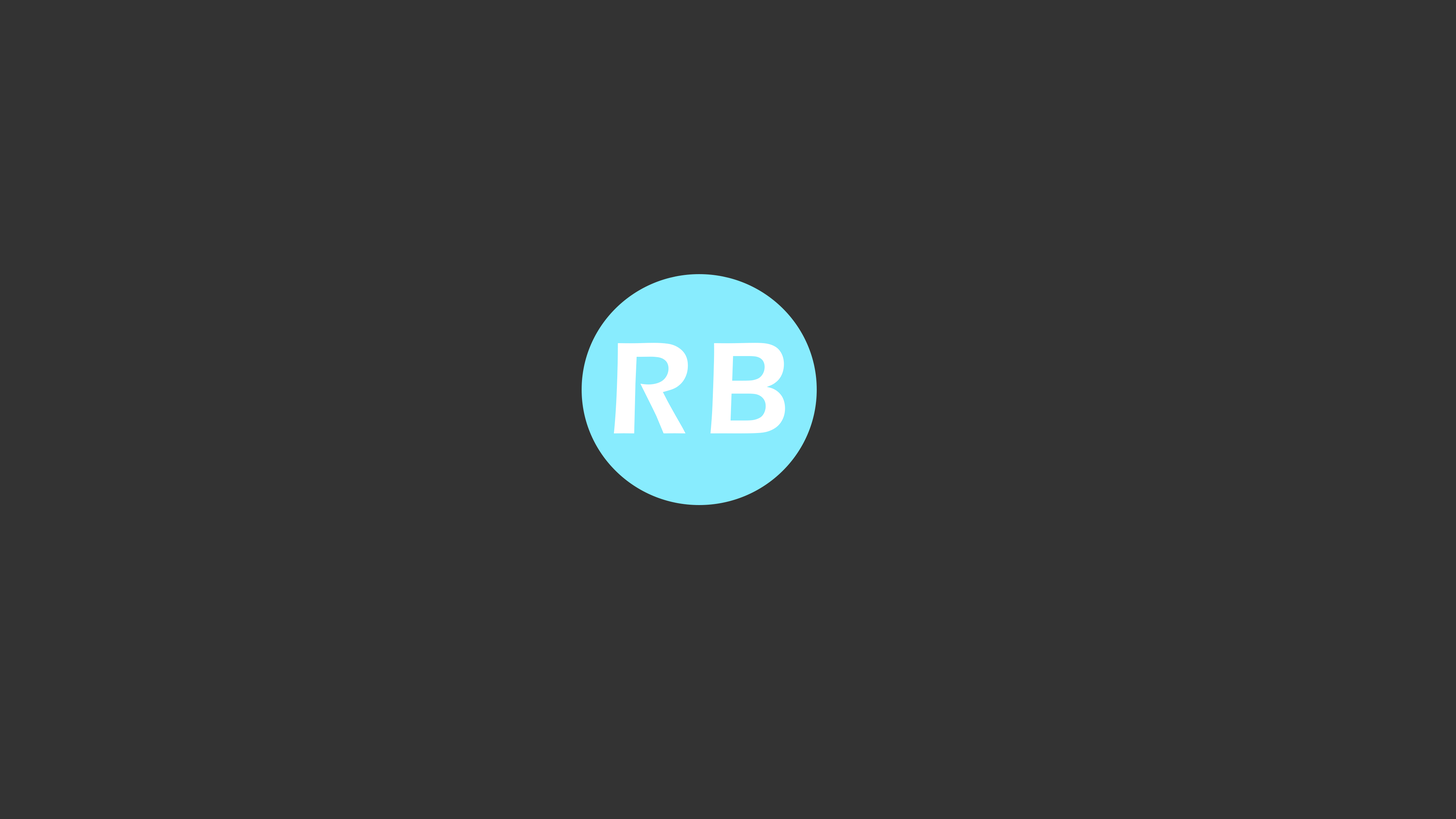
<style>
.page{position:relative;width:1456px;height:819px;background:#333333}
.page>*{position:absolute;margin:0}
.t1{font:135.5px "ErasITC-Demi";letter-spacing:0.08em;color:#ffffff}
</style>
<div class="page">
<p class="t1" style="left:614px;top:343px;width:171px;height:90px">RB</p>
</div>
